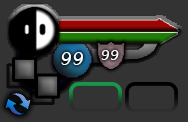
<style>
.page{position:relative;width:188px;height:122px;background:#333333}
.page>*{position:absolute;margin:0}
.t1{font:17.9px "LucidaHandwriting-Italic";color:#ffffff}
.t2{font:14px "LucidaHandwriting-Italic";color:#ffffff}
</style>
<div class="page">
<p class="t1" style="left:61px;top:52px;width:22px;height:13px">99</p>
<p class="t2" style="left:101px;top:50px;width:18px;height:10px">99</p>
</div>
